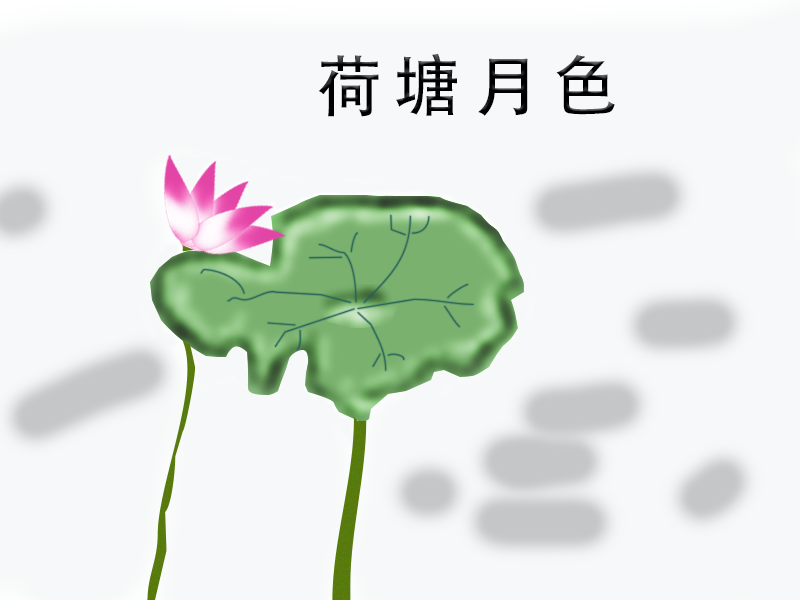
<style>
.page{position:relative;width:800px;height:600px;background:#f6f8f9}
.page>*{position:absolute;margin:0}
.t1{font:66.7px "AdobeHeitiStd-Regular";letter-spacing:0.18em;color:#000000}
</style>
<div class="page">
<p class="t1" style="left:318px;top:53px;width:297px;height:64px">荷塘月色</p>
</div>
